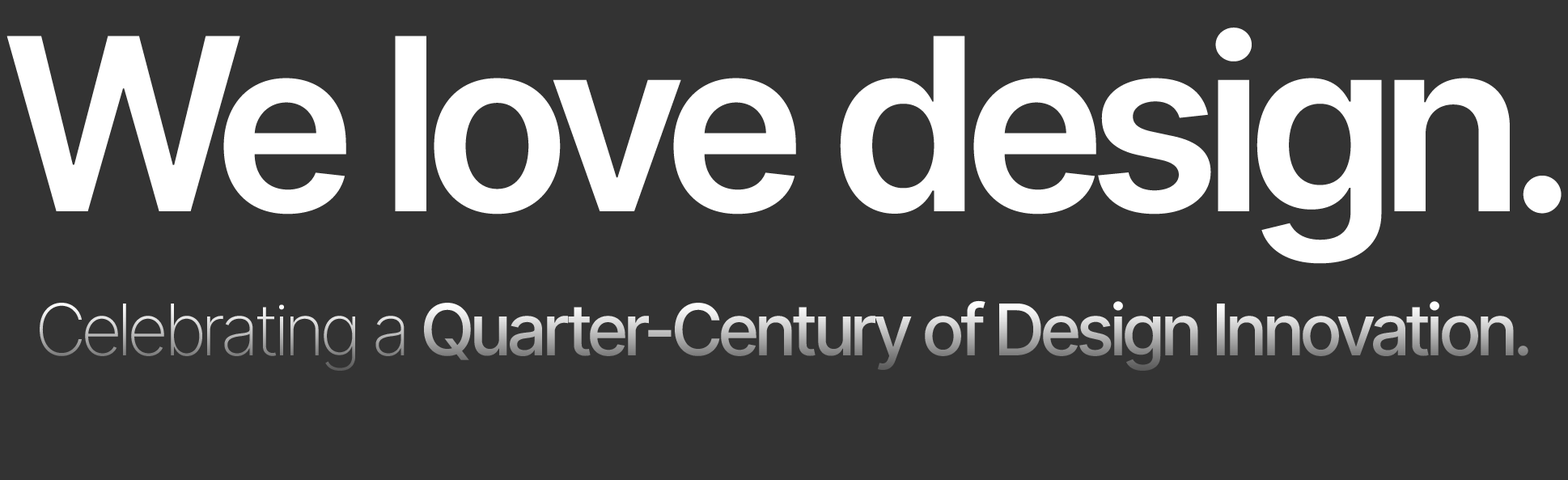
<style>
.page{position:relative;width:1568px;height:480px;background:#333333}
.page>*{position:absolute;margin:0}
.t1{font:240.6px "Inter-SemiBold";letter-spacing:-0.075em;color:#ffffff}
.t2{font:71.3px "Inter-Medium";letter-spacing:-0.075em}
.t3{font:71.3px "Inter-ExtraLight";letter-spacing:-0.075em}
</style>
<div class="page">
<p class="t1" style="left:6px;top:28px;width:1556px;height:236px">We love design.</p>
<p class="t2" style="left:40px;top:300px;width:1488px;height:71px"><span class="t3">Celebrating a </span>Quarter-Century of Design Innovation.</p>
</div>
